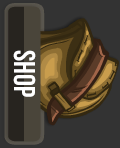
<style>
.page{position:relative;width:120px;height:148px;background:#333333}
.page>*{position:absolute;margin:0}
.t1{font:30px "BebasNeueCyrillic";color:#ffffff}
</style>
<div class="page">
<p class="t1" style="left:13px;top:50px;width:23px;height:47px;rotate:90deg">SHOP</p>
</div>
